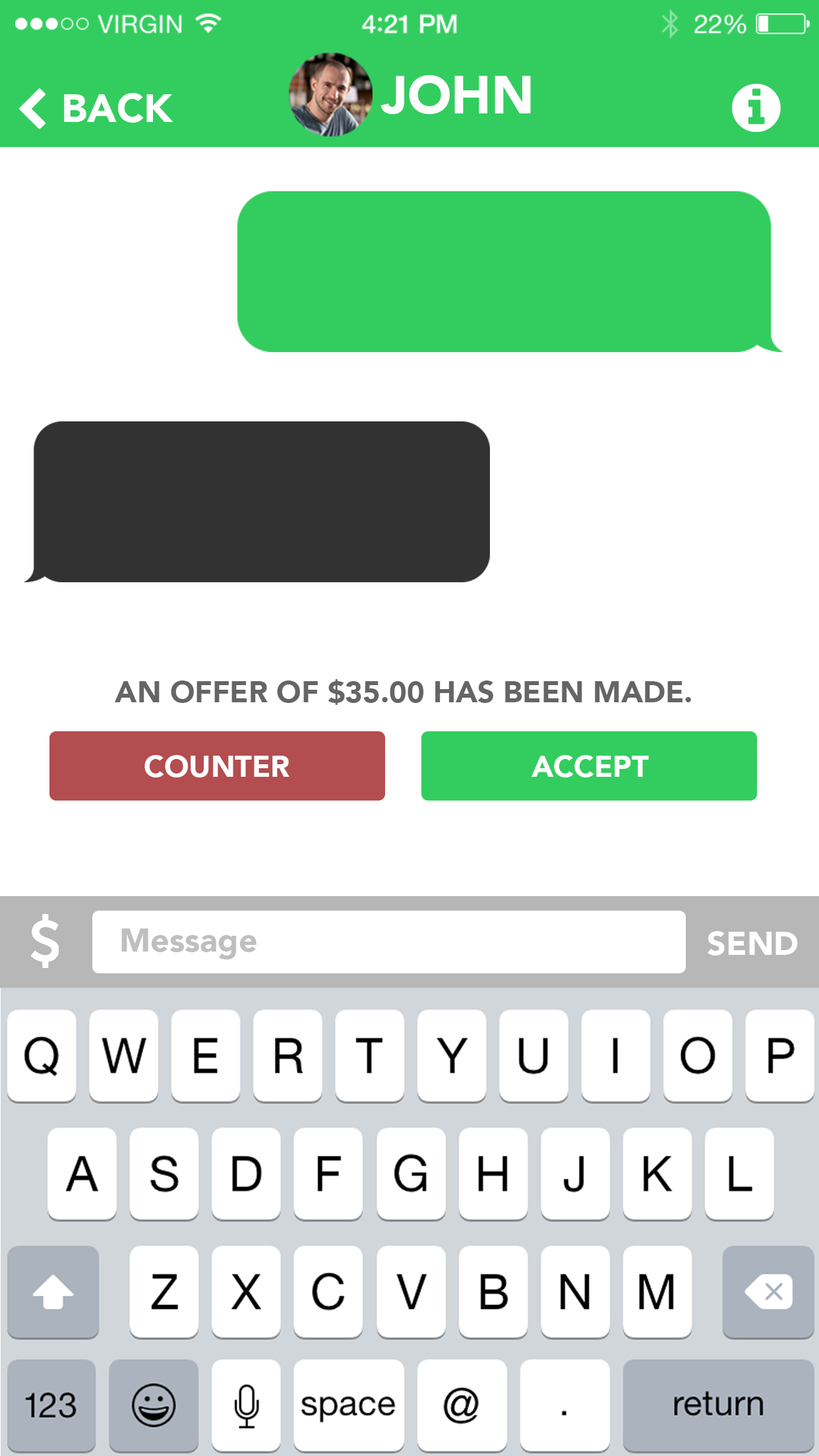
<style>
.page{position:relative;width:819px;height:1456px;background:#ffffff}
.page>*{position:absolute;margin:0}
.t1{font:52.8px "Avenir-Black";color:#ffffff}
.t2{font:39.6px "Avenir-Black";color:#ffffff}
.t3{font:29.7px "Avenir-Black";color:#656565}
.t4{font:29.7px "Avenir-Black";color:#ffffff}
.t5{font:33px "Avenir-Black";color:#bfbfbf}
.t6{font:33px "Avenir-Black";color:#ffffff}
</style>
<div class="page">
<p class="t1" style="left:380px;top:75px;width:151px;height:39px">JOHN</p>
<p class="t2" style="left:64px;top:93px;width:109px;height:30px">BACK</p>
<p class="t3" style="left:115px;top:679px;width:576px;height:26px">AN OFFER OF $35.00 HAS BEEN MADE.</p>
<p class="t4" style="left:144px;top:755px;width:145px;height:22px">COUNTER</p>
<p class="t4" style="left:531px;top:755px;width:118px;height:22px">ACCEPT</p>
<p class="t5" style="left:121px;top:928px;width:136px;height:31px">Message</p>
<p class="t6" style="left:708px;top:931px;width:90px;height:24px">SEND</p>
</div>
